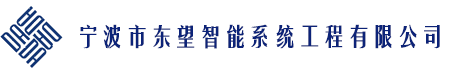
<style>
.page{position:relative;width:454px;height:75px;background:#ffffff}
.page>*{position:absolute;margin:0}
.t1{font:24px "FZYTK--GBK1-0";color:#0c2378;font-weight:bold}
</style>
<div class="page">
<p class="t1" style="left:80px;top:24px;width:360px;height:25px">宁波市东望智能系统工程有限公司</p>
</div>
